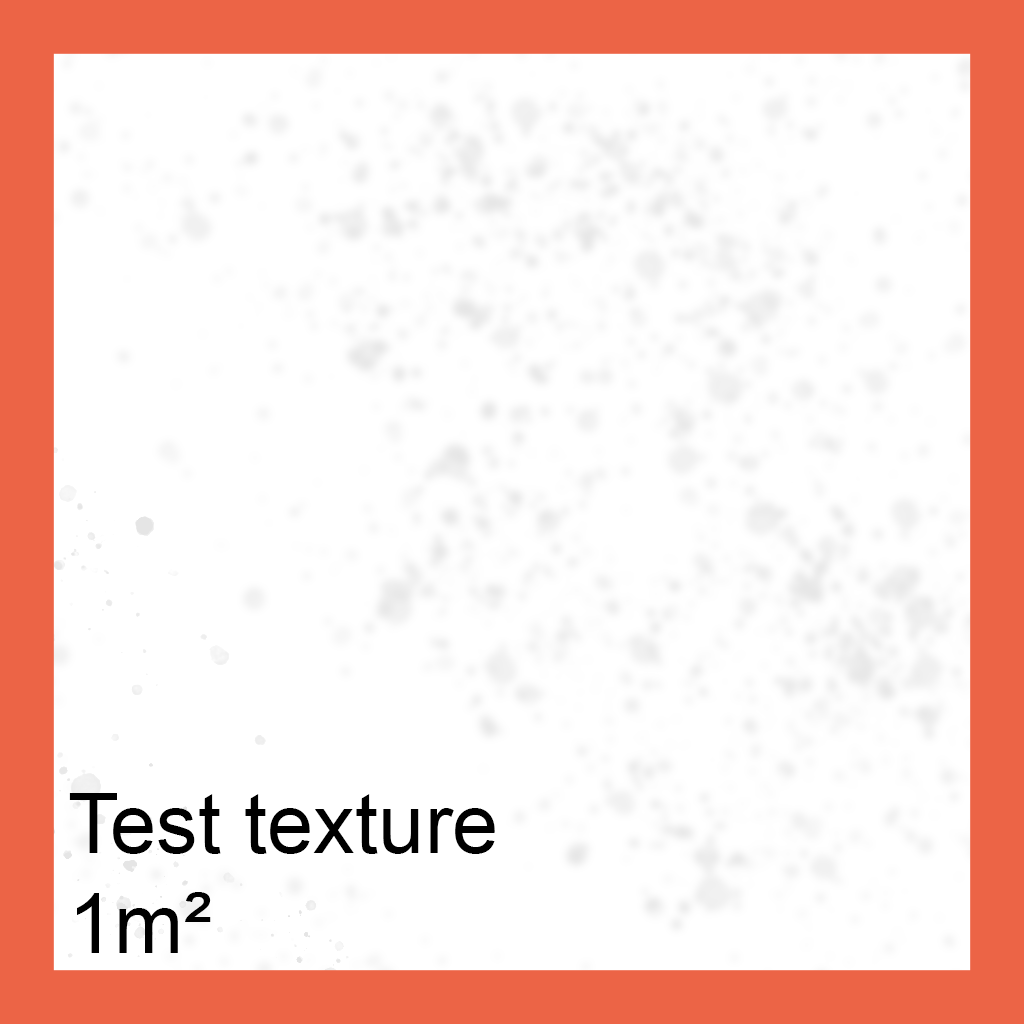
<style>
.page{position:relative;width:1024px;height:1024px;background:#ffffff}
.page>*{position:absolute;margin:0}
.t1{font:83.3px "ArialMT";color:#000000}
</style>
<div class="page">
<p class="t1" style="left:69px;top:793px;width:426px;height:160px">Test texture<br>1m²</p>
</div>
